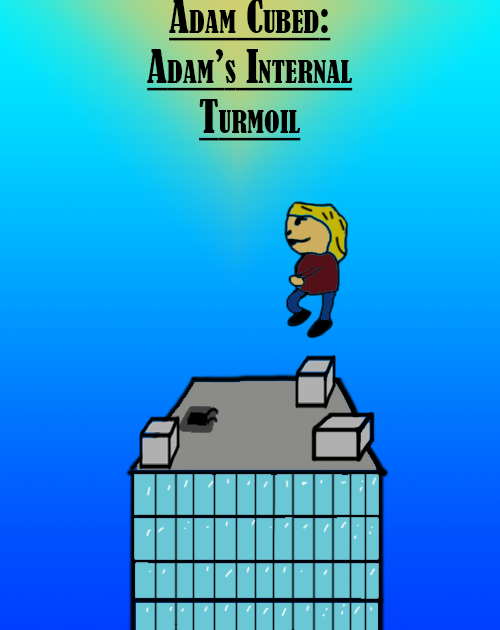
<style>
.page{position:relative;width:500px;height:630px}
.page>*{position:absolute;margin:0}
.t1{font:41.7px "BernardMT-Condensed";color:#000000;font-variant:small-caps;text-decoration:underline}
</style>
<div class="page">
<p class="t1" style="left:147px;top:0px;width:206px;height:141px;text-align:center">Adam Cubed:<br>Adam’s Internal<br>Turmoil</p>
</div>
